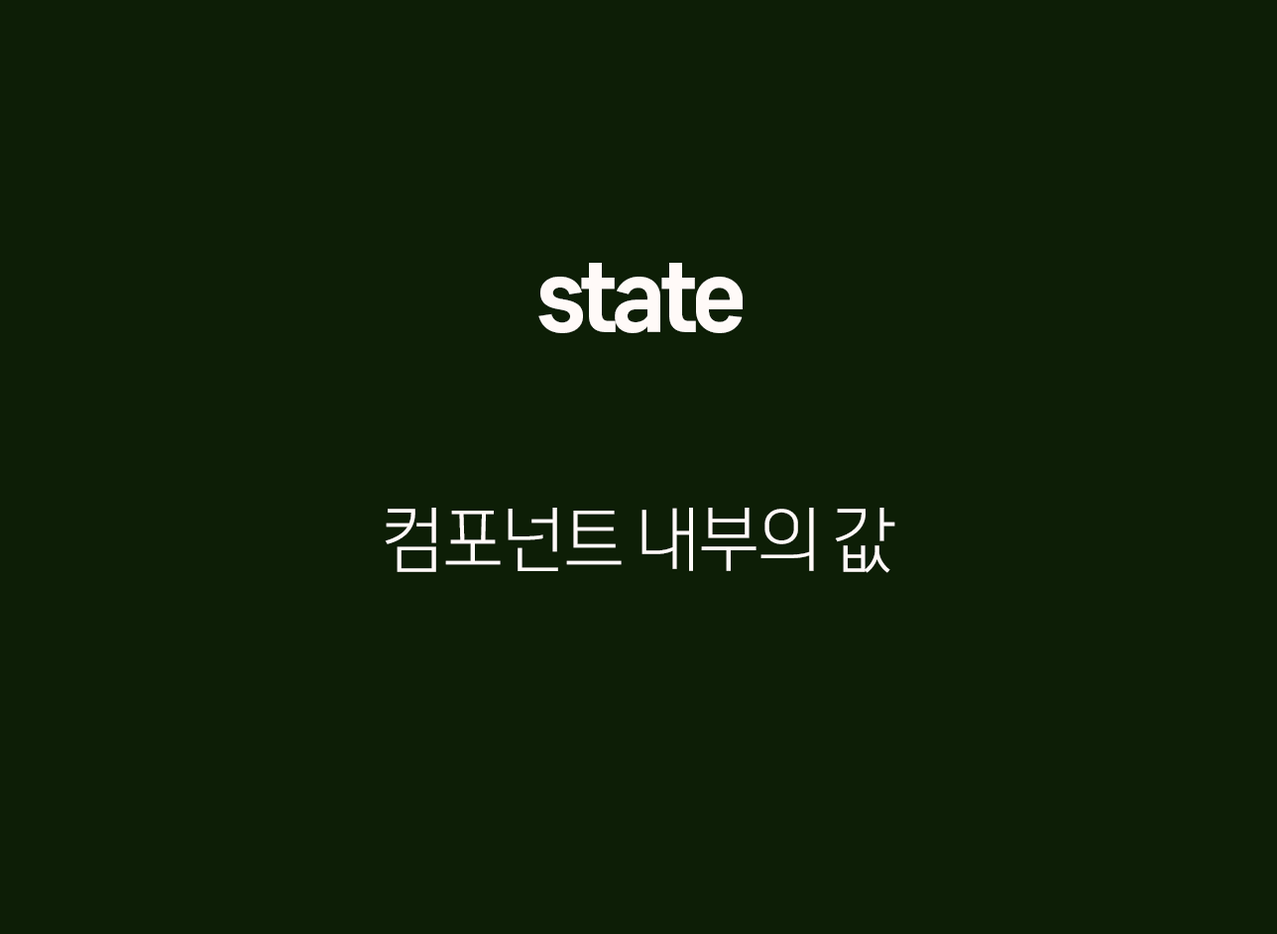
<style>
.page{position:relative;width:1277px;height:934px;background:#0d1e06}
.page>*{position:absolute;margin:0}
.t1{font:98.1px "CoreGothicD-7ExtraBold";letter-spacing:-0.075em;color:#fffaf8}
.t2{font:71.4px "CoreGothicD-3Light";letter-spacing:-0.075em;color:#fffaf8}
</style>
<div class="page">
<p class="t1" style="left:538px;top:263px;width:205px;height:70px">state</p>
<p class="t2" style="left:385px;top:508px;width:510px;height:65px">컴포넌트 내부의 값</p>
</div>
